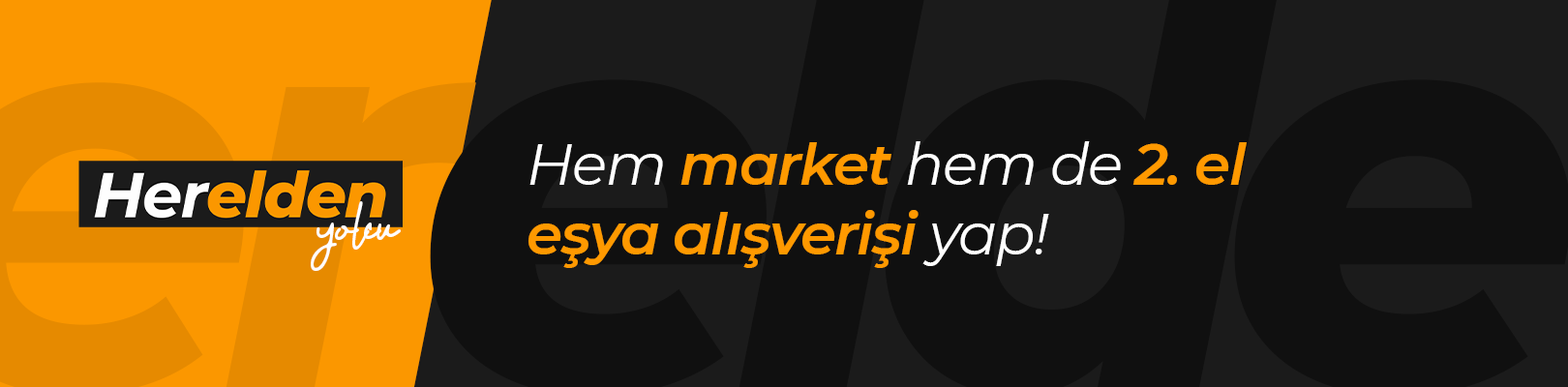
<style>
.page{position:relative;width:1568px;height:387px;background:#101010}
.page>*{position:absolute;margin:0}
.t1{font:57.8px "Montserrat-SemiBoldItalic";letter-spacing:-0.025em;color:#ff9900}
.t2{font:57.8px "Montserrat-Italic";letter-spacing:-0.025em;color:#ffffff}
.t3{font:84.5px "Better-Yesterday";letter-spacing:-0.025em;color:#fefefe}
</style>
<div class="page">
<p class="t1" style="left:528px;top:141px;width:719px;height:127px"><span class="t2">Hem </span>market <span class="t2">hem de </span>2. el <br>eşya alışverişi<span class="t2"> yap!</span></p>
<p class="t3" style="left:311px;top:201px;width:90px;height:70px">yolcu</p>
</div>
